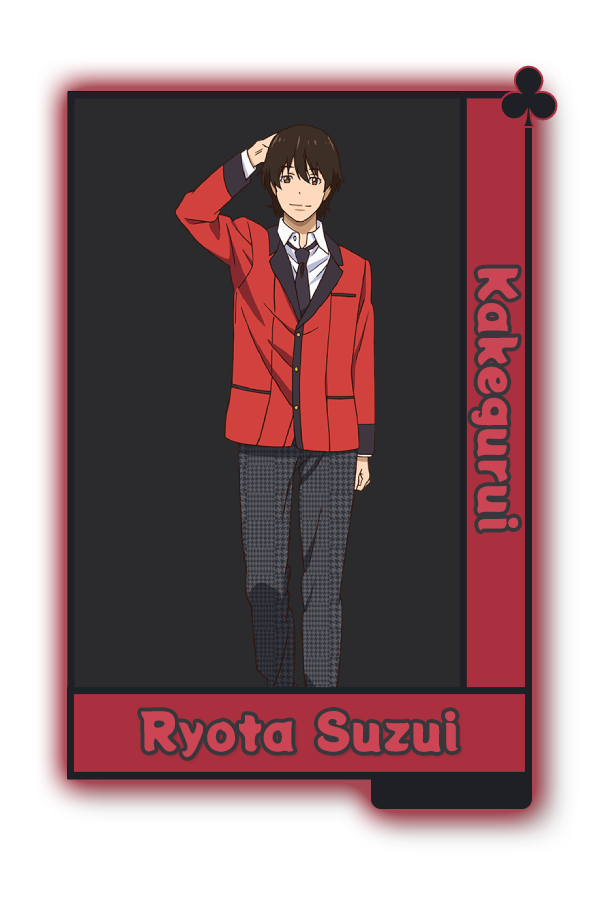
<style>
.page{position:relative;width:600px;height:900px;background:#2b2a2d}
.page>*{position:absolute;margin:0}
.t1{font:80px "DejaVuSans";color:#1e2026}
.t2{font:50px "PottaOne-Regular";color:#cb4554}
</style>
<div class="page">
<p class="t1" style="left:501px;top:67px;width:55px;height:59px">♣️</p>
<p class="t2" style="left:471px;top:268px;width:48px;height:263px;rotate:90deg">Kakegurui</p>
<p class="t2" style="left:141px;top:710px;width:317px;height:48px">Ryota Suzui</p>
</div>
